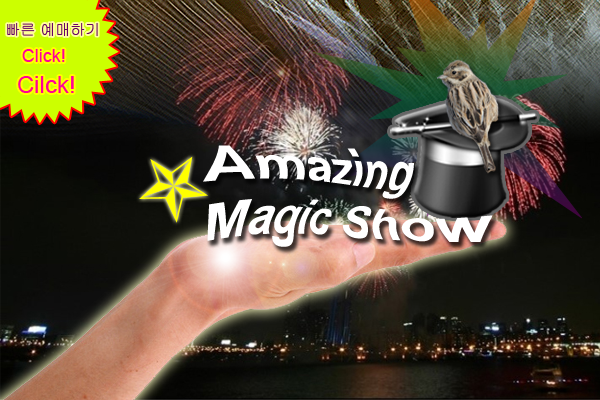
<style>
.page{position:relative;width:600px;height:400px}
.page>*{position:absolute;margin:0}
.t1{font:15px "Gulim";color:#660066}
.t2{font:18px/26.8px "ArialMT";color:#ff0099}
.t3{font:24px/26.8px "ArialMT";color:#ff0099}
.t4{font:50px/60px "Arial-BoldMT";color:#ffffff}
</style>
<div class="page">
<p class="t1" style="left:7px;top:23px;width:91px;height:13px">빠른 예매하기</p>
<p class="t2" style="left:18px;top:49px;width:56px;height:44px">Click!<br><span class="t3">Cilck!</span></p>
<p class="t4" style="left:203px;top:145px;width:290px;height:102px">Amazing<br>Magic Show</p>
</div>
